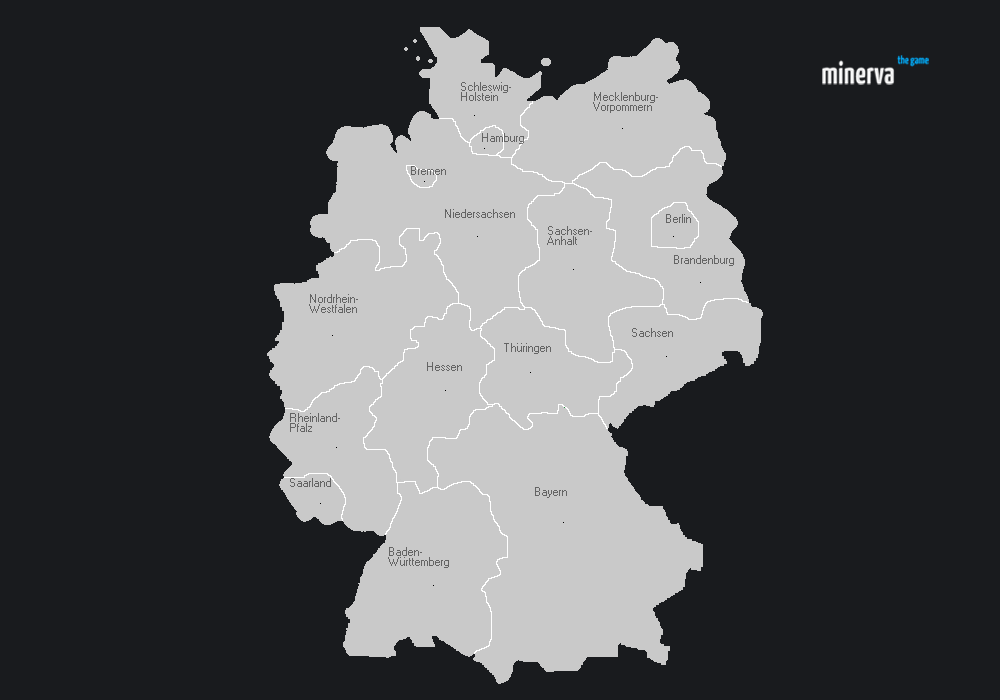
<style>
.page{position:relative;width:1000px;height:700px;background:#191b1e}
.page>*{position:absolute;margin:0}
.t1{font:8px/10px "MS Sans Serif";color:#646464}
.t2{font:8px "MS Sans Serif";color:#646464}
</style>
<div class="page">
<p class="t1" style="left:461px;top:82px;width:50px;height:19px">Schleswig-<br>Holstein</p>
<p class="t1" style="left:593px;top:92px;width:65px;height:21px">Mecklenburg-<br>Vorpommern</p>
<p class="t2" style="left:482px;top:133px;width:42px;height:11px">Hamburg</p>
<p class="t2" style="left:411px;top:166px;width:35px;height:9px">Bremen</p>
<p class="t2" style="left:445px;top:209px;width:70px;height:9px">Niedersachsen</p>
<p class="t2" style="left:666px;top:214px;width:25px;height:9px">Berlin</p>
<p class="t1" style="left:547px;top:226px;width:45px;height:19px">Sachsen-<br>Anhalt</p>
<p class="t2" style="left:674px;top:255px;width:60px;height:11px">Brandenburg</p>
<p class="t1" style="left:309px;top:294px;width:49px;height:19px">Nordrhein-<br>Westfalen</p>
<p class="t2" style="left:632px;top:328px;width:41px;height:9px">Sachsen</p>
<p class="t2" style="left:504px;top:343px;width:47px;height:11px">Thüringen</p>
<p class="t2" style="left:427px;top:362px;width:35px;height:9px">Hessen</p>
<p class="t1" style="left:290px;top:413px;width:50px;height:19px">Rheinland-<br>Pfalz</p>
<p class="t2" style="left:290px;top:478px;width:41px;height:9px">Saarland</p>
<p class="t2" style="left:535px;top:487px;width:32px;height:11px">Bayern</p>
<p class="t1" style="left:388px;top:547px;width:61px;height:21px">Baden-<br>Württemberg</p>
</div>
